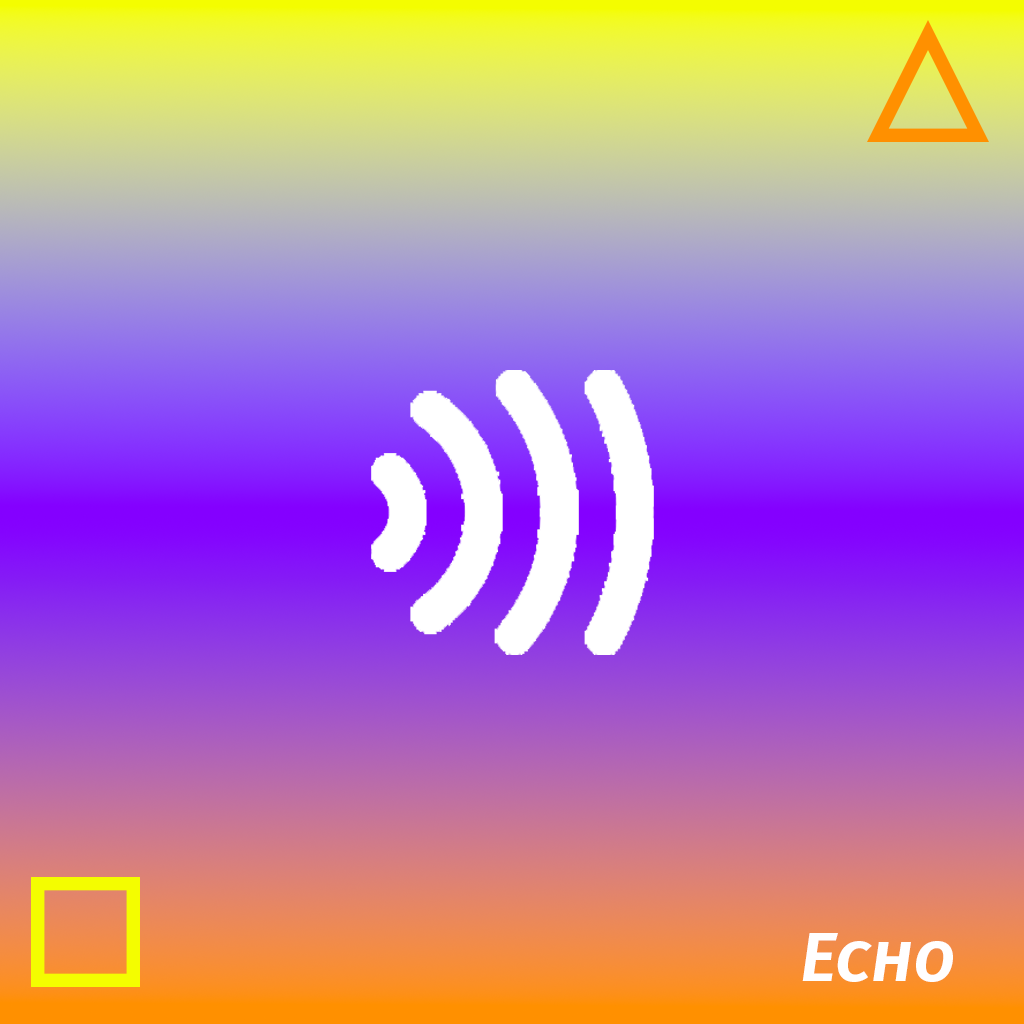
<style>
.page{position:relative;width:1024px;height:1024px}
.page>*{position:absolute;margin:0}
.t1{font:70px "FiraSans-SemiBoldItalic";color:#fffefe;font-variant:small-caps}
</style>
<div class="page">
<p class="t1" style="left:802px;top:933px;width:151px;height:49px">Echo</p>
</div>
